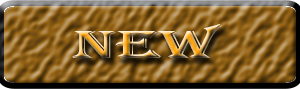
<style>
.page{position:relative;width:300px;height:89px}
.page>*{position:absolute;margin:0}
.t1{font:40.4px "Algerian";color:#ffa200;scale:1.76 1}
</style>
<div class="page">
<p class="t1" style="left:72px;top:24px;width:151px;height:34px">New</p>
</div>
